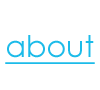
<style>
.page{position:relative;width:100px;height:90px;background:#ffffff}
.page>*{position:absolute;margin:0}
.t1{font:30px "CenturyGothic";color:#1cbbe9;text-decoration:underline}
</style>
<div class="page">
<p class="t1" style="left:5px;top:35px;width:90px;height:29px">about</p>
</div>
